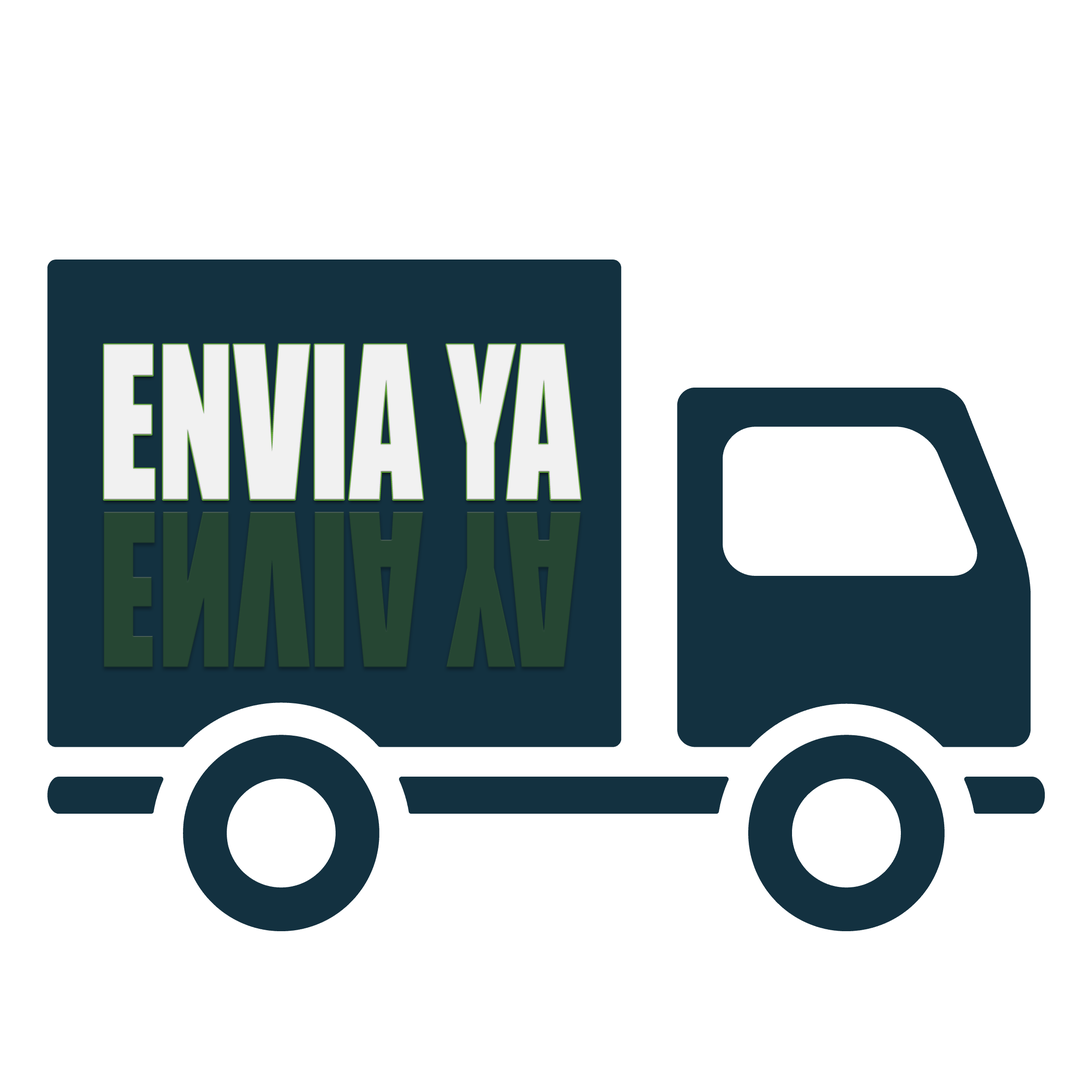
<style>
.page{position:relative;width:1092px;height:1092px;background:#ffffff}
.page>*{position:absolute;margin:0}
.t1{font:196.2px "Impact";color:#f1f1f1;scale:0.73 1}
.t2{font:196.2px "Impact";color:#335725;scale:0.73 1}
</style>
<div class="page">
<p class="t1" style="left:104px;top:344px;width:477px;height:156px">ENVIA YA</p>
<p class="t2" style="left:104px;top:512px;width:477px;height:155px;opacity:0.52">ENVIA YA</p>
</div>
